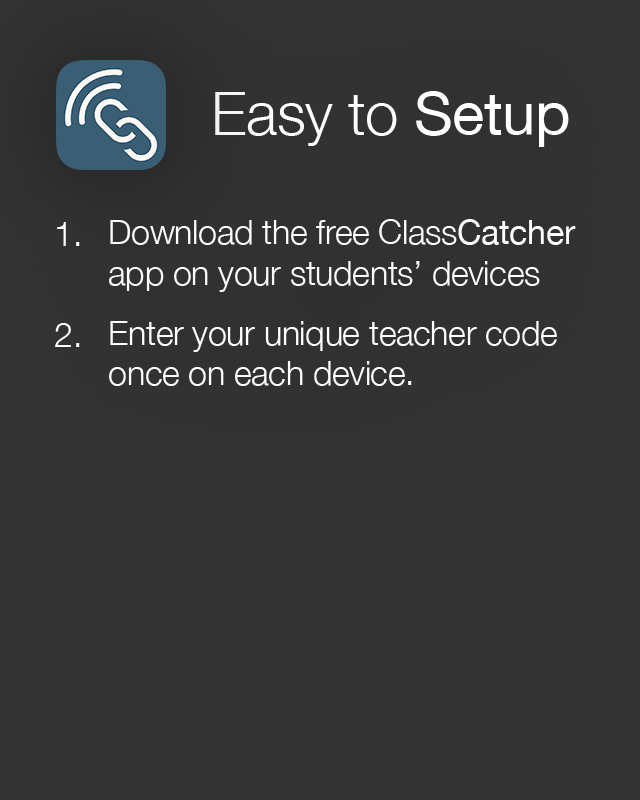
<style>
.page{position:relative;width:640px;height:800px;background:#333333}
.page>*{position:absolute;margin:0}
.t1{font:60px "HelveticaNeue-Light";letter-spacing:-0.01em;color:#ffffff}
.t2{font:60px "HelveticaNeue";letter-spacing:-0.01em;color:#ffffff}
.t3{font:33.9px "HelveticaNeue-Light";letter-spacing:-0.01em;color:#ffffff}
.t4{font:33.9px "HelveticaNeue";letter-spacing:-0.01em;color:#ffffff}
</style>
<div class="page">
<p class="t1" style="left:215px;top:91px;width:354px;height:56px">Easy to <span class="t2">Setup</span></p>
<p class="t3" style="left:57px;top:222px;width:23px;height:24px">1.</p>
<p class="t3" style="left:109px;top:219px;width:467px;height:73px">Download the free Class<span class="t4">Catcher </span>app on your students’ devices</p>
<p class="t3" style="left:55px;top:323px;width:25px;height:24px">2.</p>
<p class="t3" style="left:109px;top:321px;width:448px;height:65px">Enter your unique teacher code once on each device.</p>
</div>
